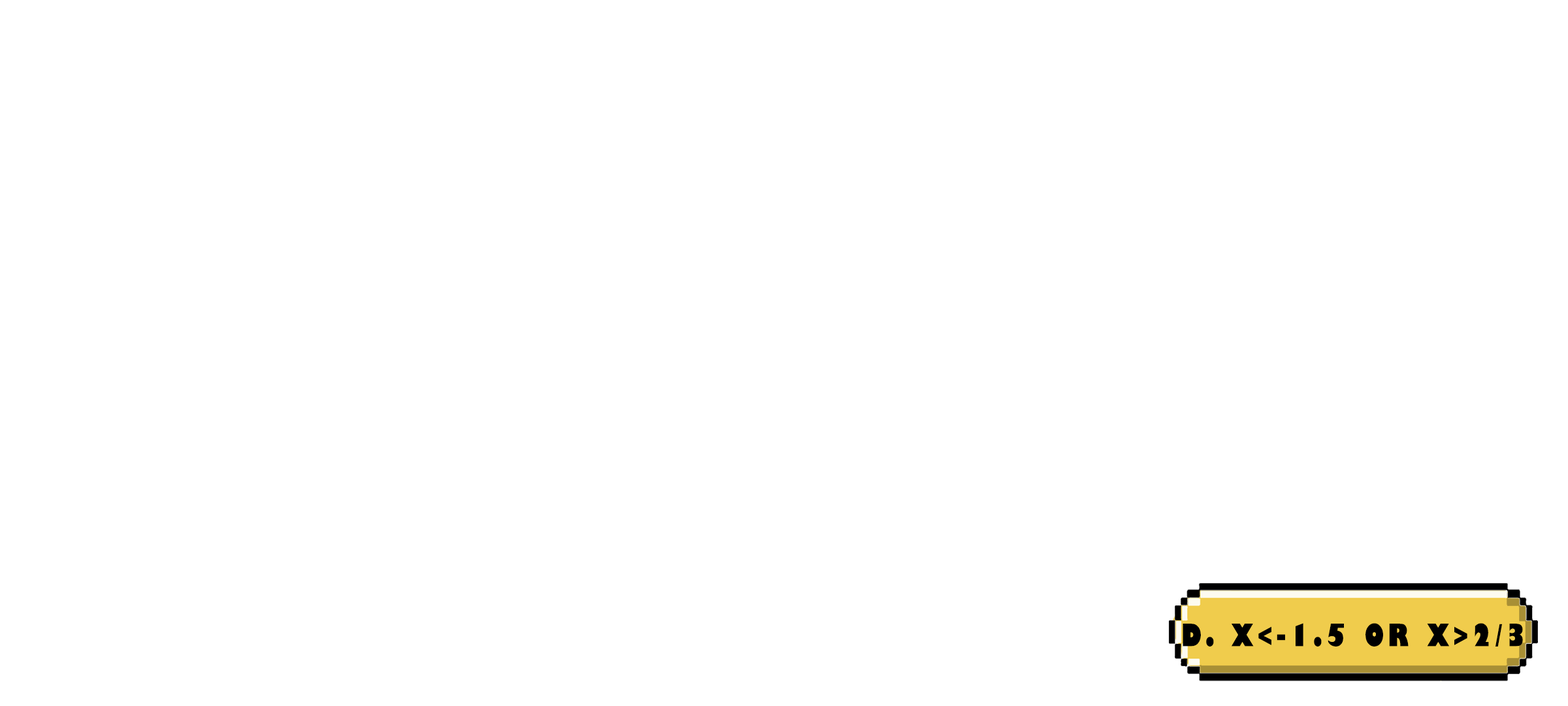
<style>
.page{position:relative;width:1568px;height:706px;background:#ffffff}
.page>*{position:absolute;margin:0}
.t1{font:29.9px "GillSans-UltraBoldCondensed";letter-spacing:0.115em;color:#000000;text-transform:uppercase;scale:1.12 1}
</style>
<div class="page">
<p class="t1" style="left:1183px;top:623px;width:340px;height:23px">d. x&lt;-1.5 or x&gt;2/3</p>
</div>
